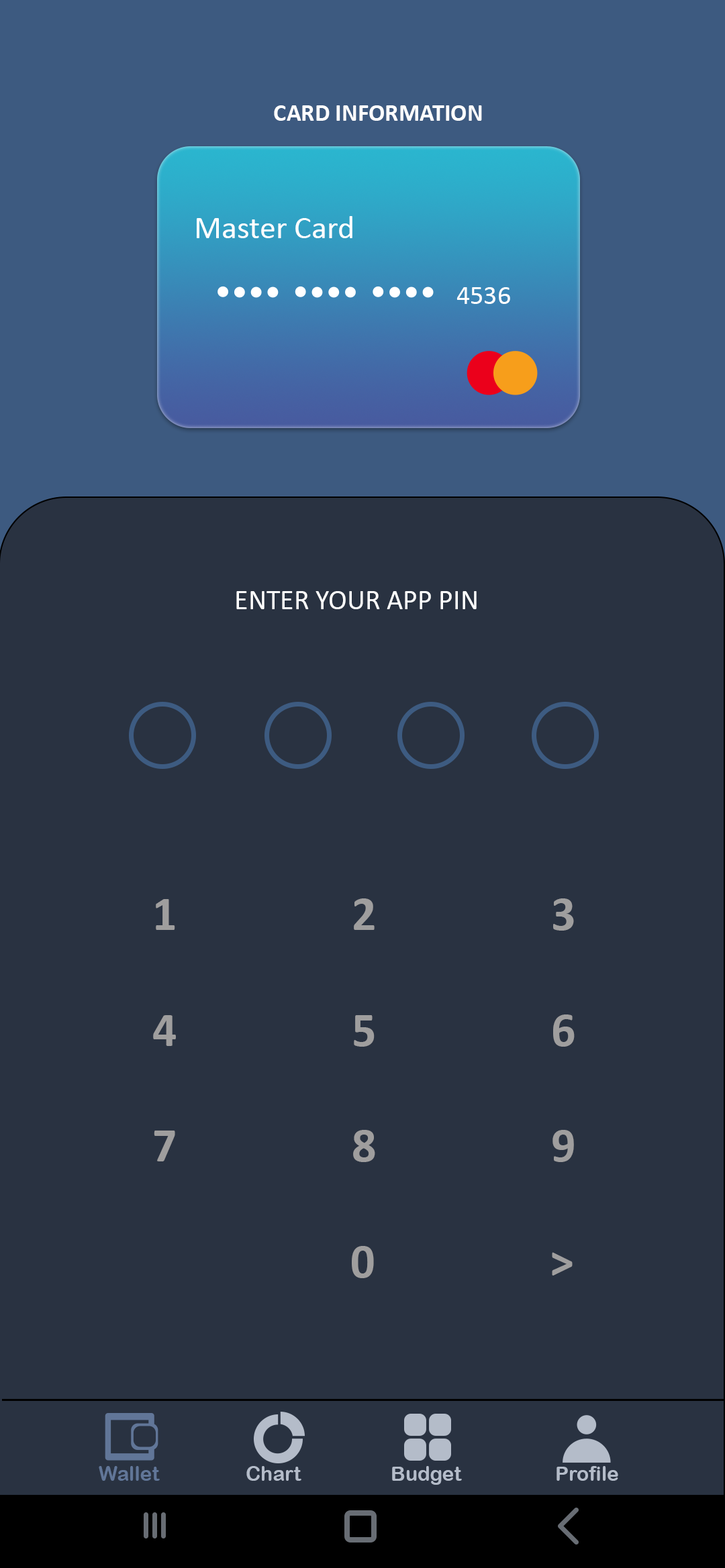
<style>
.page{position:relative;width:725px;height:1568px;background:#293241}
.page>*{position:absolute;margin:0}
.t1{font:24.2px "Calibri-Bold";color:#ffffff}
.t2{font:32.2px "Calibri";color:#ffffff}
.t3{font:26.8px "Calibri";color:#ffffff}
.t4{font:28.2px "Calibri";color:#ffffff}
.t5{font:48.3px "Calibri-Bold";color:#9f9e9e}
.t6{font:20.1px "ArialRoundedMTBold";color:#617698}
.t7{font:20.1px "ArialRoundedMTBold";color:#b4bcc9}
</style>
<div class="page">
<p class="t1" style="left:274px;top:105px;width:208px;height:16px">CARD INFORMATION</p>
<p class="t2" style="left:197px;top:216px;width:155px;height:22px">Master Card</p>
<p class="t3" style="left:456px;top:287px;width:54px;height:17px">4536</p>
<p class="t4" style="left:236px;top:591px;width:240px;height:18px">ENTER YOUR APP PIN</p>
<p class="t5" style="left:153px;top:898px;width:421px;height:380px;text-align:center">1                2                3<br><br>4                5                6<br><br>7                8                9<br><br>                  0                &gt;</p>
<p class="t6" style="left:99px;top:1466px;width:61px;height:15px">Wallet</p>
<p class="t7" style="left:246px;top:1466px;width:55px;height:15px">Chart</p>
<p class="t7" style="left:392px;top:1466px;width:70px;height:19px">Budget</p>
<p class="t7" style="left:556px;top:1466px;width:62px;height:15px">Profile</p>
</div>
